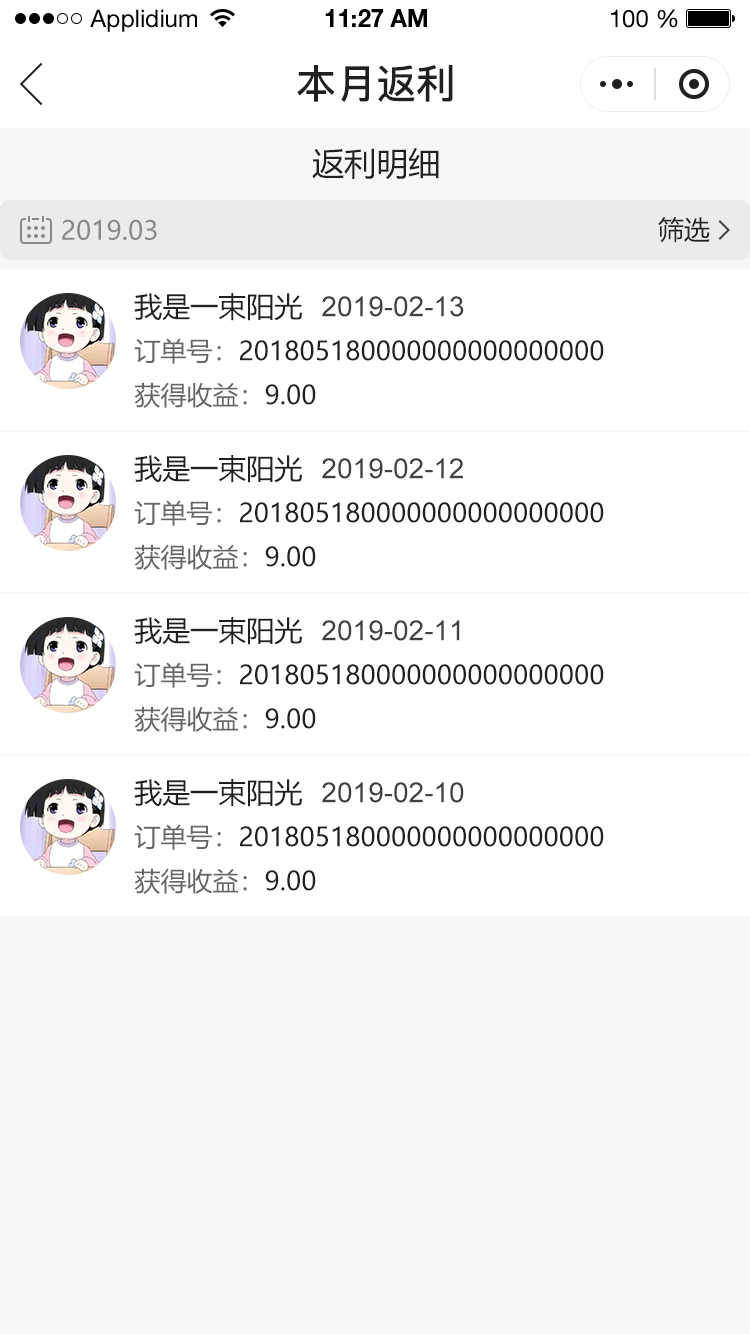
<style>
.page{position:relative;width:750px;height:1334px;background:#ffffff}
.page>*{position:absolute;margin:0}
.t1{font:24px "HelveticaNeueLTStd-Roman";color:#000000}
.t2{font:24px "HelveticaNeueLTStd-Bd";color:#000000}
.t3{font:40px "PingFang-SC-Bold";color:#202020;text-transform:uppercase}
.t4{font:32px "MicrosoftYaHei";color:#202020;text-transform:uppercase}
.t5{font:26px "MicrosoftYaHei";color:#888888;text-transform:uppercase}
.t6{font:26px "MicrosoftYaHei";color:#202020;text-transform:uppercase}
.t7{font:28px "MicrosoftYaHei";color:#202020;text-transform:uppercase}
.t8{font:28px "ArialMT";color:#404040;text-transform:uppercase}
.t9{font:26px "MicrosoftYaHei";color:#666666;text-transform:uppercase}
</style>
<div class="page">
<p class="t1" style="left:90px;top:9px;width:107px;height:23px">Applidium</p>
<p class="t2" style="left:325px;top:9px;width:102px;height:18px">11:27 AM</p>
<p class="t1" style="left:611px;top:9px;width:67px;height:19px">100 %</p>
<p class="t3" style="left:297px;top:65px;width:156px;height:37px">本月返利</p>
<p class="t4" style="left:312px;top:147px;width:127px;height:33px">返利明细</p>
<p class="t5" style="left:62px;top:219px;width:95px;height:21px">2019.03</p>
<p class="t6" style="left:658px;top:217px;width:52px;height:26px">筛选</p>
<p class="t7" style="left:134px;top:293px;width:168px;height:28px">我是一束阳光</p>
<p class="t8" style="left:322px;top:296px;width:142px;height:21px">2019-02-13</p>
<p class="t6" style="left:134px;top:338px;width:470px;height:26px"><span class="t9">订单号：</span>201805180000000000000000</p>
<p class="t9" style="left:134px;top:382px;width:182px;height:26px">获得收益：<span class="t6">9.00</span></p>
<p class="t7" style="left:134px;top:455px;width:168px;height:28px">我是一束阳光</p>
<p class="t8" style="left:322px;top:458px;width:141px;height:21px">2019-02-12</p>
<p class="t6" style="left:134px;top:500px;width:470px;height:26px"><span class="t9">订单号：</span>201805180000000000000000</p>
<p class="t9" style="left:134px;top:544px;width:182px;height:26px">获得收益：<span class="t6">9.00</span></p>
<p class="t7" style="left:134px;top:617px;width:168px;height:28px">我是一束阳光</p>
<p class="t8" style="left:322px;top:620px;width:138px;height:21px">2019-02-11</p>
<p class="t6" style="left:134px;top:662px;width:470px;height:26px"><span class="t9">订单号：</span>201805180000000000000000</p>
<p class="t9" style="left:134px;top:706px;width:182px;height:26px">获得收益：<span class="t6">9.00</span></p>
<p class="t7" style="left:134px;top:779px;width:168px;height:28px">我是一束阳光</p>
<p class="t8" style="left:322px;top:782px;width:142px;height:21px">2019-02-10</p>
<p class="t6" style="left:134px;top:824px;width:470px;height:26px"><span class="t9">订单号：</span>201805180000000000000000</p>
<p class="t9" style="left:134px;top:868px;width:182px;height:26px">获得收益：<span class="t6">9.00</span></p>
</div>
